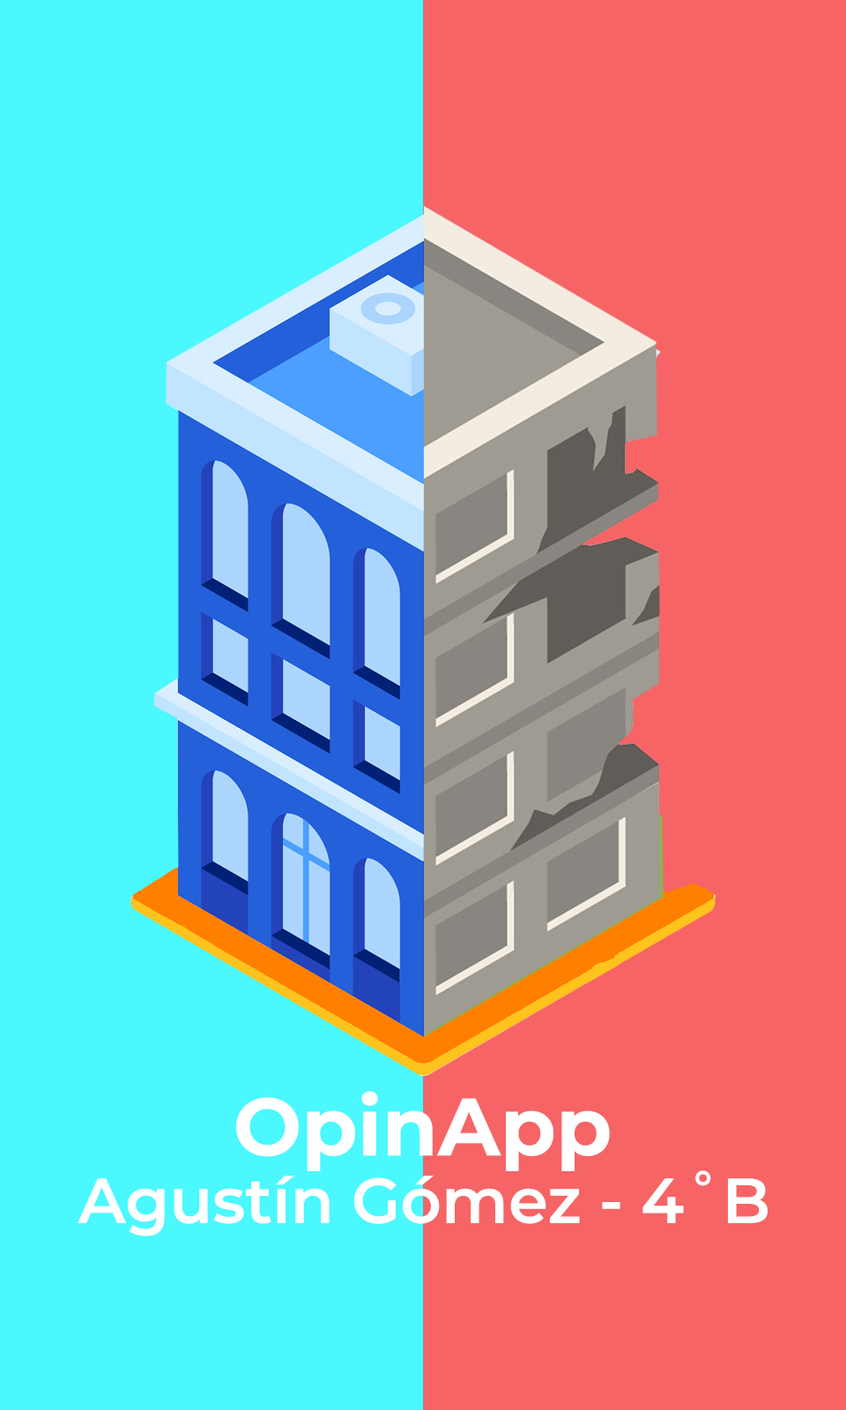
<style>
.page{position:relative;width:846px;height:1410px;background:#f66466}
.page>*{position:absolute;margin:0}
.t1{font:81.1px "Montserrat-Bold";color:#ffffff}
.t2{font:63.4px "Montserrat-SemiBold";color:#ffffff}
</style>
<div class="page">
<p class="t1" style="left:236px;top:1091px;width:374px;height:80px">OpinApp</p>
<p class="t2" style="left:78px;top:1170px;width:689px;height:66px">Agustín Gómez - 4˚B</p>
</div>
